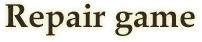
<style>
.page{position:relative;width:202px;height:42px;background:#ffffff}
.page>*{position:absolute;margin:0}
.t1{font:33.3px "BookAntiqua-Bold";color:#332a1c}
</style>
<div class="page">
<p class="t1" style="left:5px;top:3px;width:190px;height:33px">Repair game</p>
</div>
